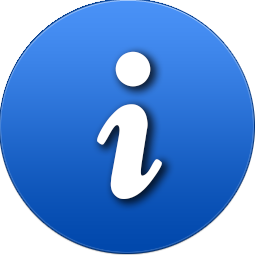
<style>
.page{position:relative;width:256px;height:256px;background:#ffffff}
.page>*{position:absolute;margin:0}
.t1{font:190px "HoeflerText-BlackItalic";color:#ffffff}
</style>
<div class="page">
<p class="t1" style="left:97px;top:51px;width:65px;height:148px;rotate:-15deg">i</p>
</div>
